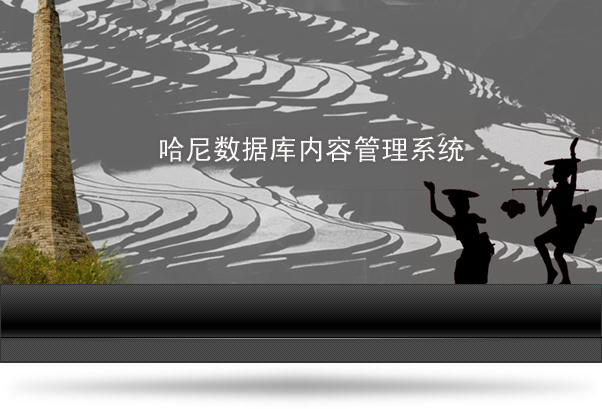
<style>
.page{position:relative;width:602px;height:409px}
.page>*{position:absolute;margin:0}
.t1{font:28px "SimHei";color:#fdf9f9}
</style>
<div class="page">
<p class="t1" style="left:160px;top:136px;width:304px;height:26px">哈尼数据库内容管理系统</p>
</div>
